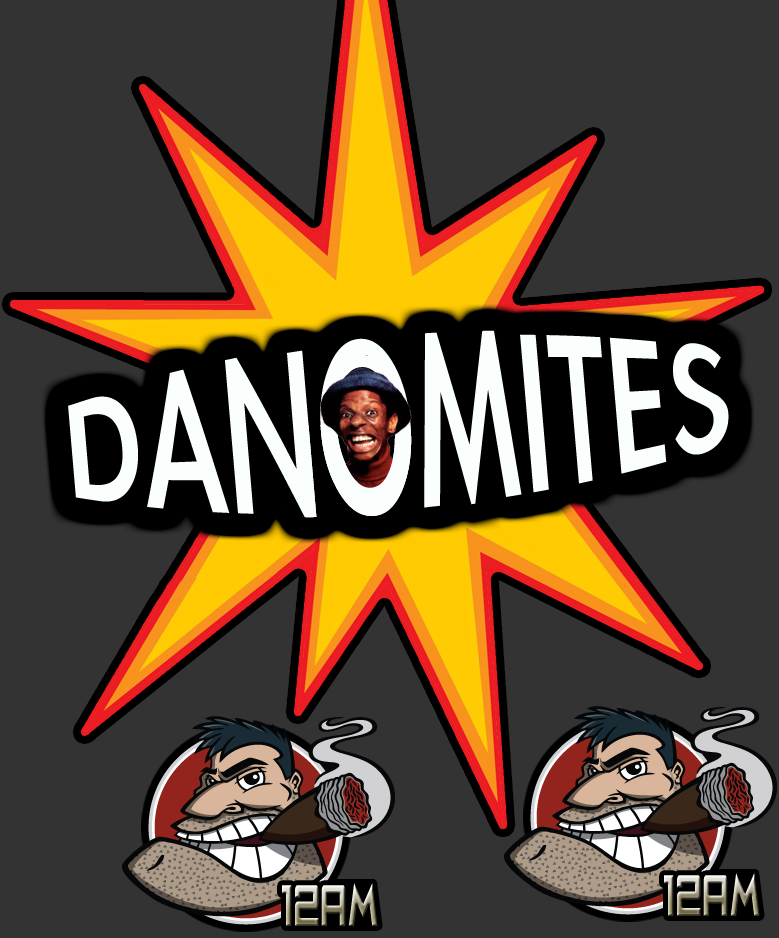
<style>
.page{position:relative;width:779px;height:938px;background:#333333}
.page>*{position:absolute;margin:0}
.t1{font:145.8px "LiGothicMed";letter-spacing:0.025em;color:#fafffe}
.t2{font:54px "CafeNeroM54";letter-spacing:0.05em;scale:0.56 1}
</style>
<div class="page">
<p class="t1" style="left:68px;top:330px;width:661px;height:188px;rotate:-5deg">DANOMITES</p>
<p class="t2" style="left:664px;top:873px;width:96px;height:43px">12AM</p>
<p class="t2" style="left:282px;top:883px;width:96px;height:43px">12AM</p>
</div>
